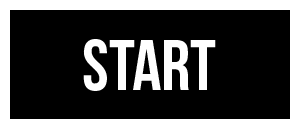
<style>
.page{position:relative;width:300px;height:129px;background:#000000}
.page>*{position:absolute;margin:0}
.t1{font:72px "BebasNeueBold";color:#ffffff}
</style>
<div class="page">
<p class="t1" style="left:83px;top:39px;width:133px;height:52px">start</p>
</div>
